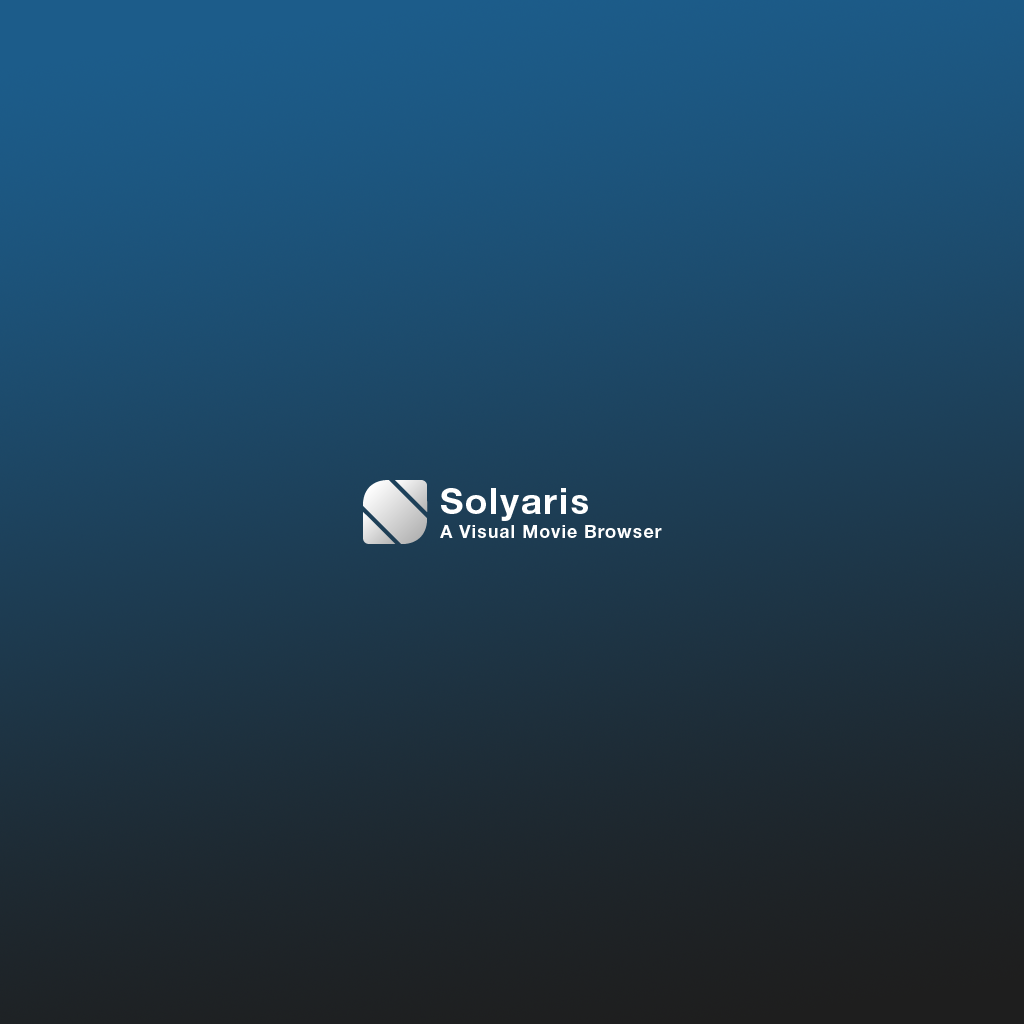
<style>
.page{position:relative;width:1024px;height:1024px}
.page>*{position:absolute;margin:0}
.t1{font:36px "HelveticaNeueLTStd-Bd";letter-spacing:0.05em;color:#ffffff}
.t2{font:18px "HelveticaNeueLTStd-Bd";letter-spacing:0.05em;color:#ffffff}
</style>
<div class="page">
<p class="t1" style="left:441px;top:488px;width:147px;height:33px">Solyaris</p>
<p class="t2" style="left:440px;top:525px;width:222px;height:13px">A Visual Movie Browser</p>
</div>
